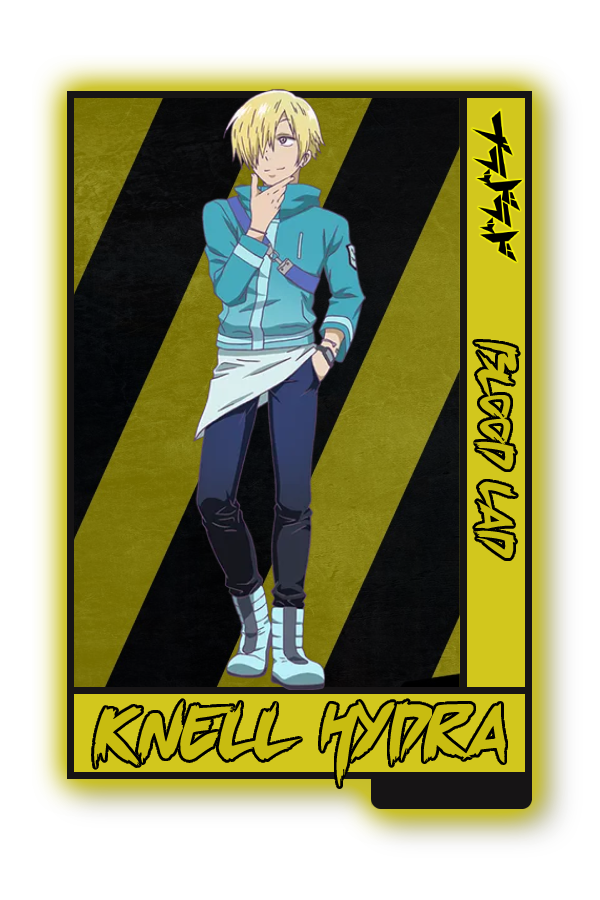
<style>
.page{position:relative;width:600px;height:900px;background:#ffffff}
.page>*{position:absolute;margin:0}
.t1{font:48.8px "ChillingSabrina";color:#c8bc10}
.t2{font:75px "ChillingSabrina";color:#c8bc10}
</style>
<div class="page">
<p class="t1" style="left:473px;top:341px;width:45px;height:218px;rotate:90deg">Blood Lad</p>
<p class="t2" style="left:94px;top:699px;width:412px;height:88px">Knell Hydra</p>
</div>
